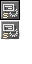
<style>
.page{position:relative;width:32px;height:64px;background:#ffffff}
.page>*{position:absolute;margin:0}
.t1{font:8px "FZXS12--GB1-0";letter-spacing:0.04em;color:#ffeab1}
</style>
<div class="page">
<p class="t1" style="left:3px;top:13px;width:5px;height:5px">s</p>
<p class="t1" style="left:3px;top:33px;width:5px;height:5px">s</p>
</div>
